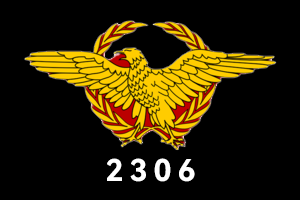
<style>
.page{position:relative;width:300px;height:200px;background:#000000}
.page>*{position:absolute;margin:0}
.t1{font:30px "HarmonyOS_Sans_SC_Bold";letter-spacing:0.2em;color:#ffffff}
</style>
<div class="page">
<p class="t1" style="left:107px;top:158px;width:88px;height:24px">2306</p>
</div>
